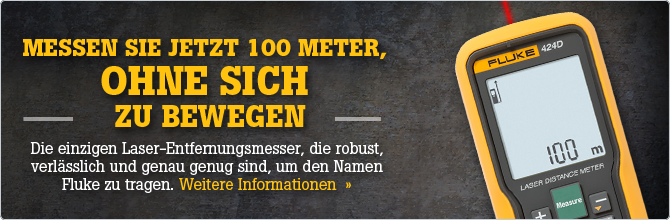
<style>
.page{position:relative;width:670px;height:220px}
.page>*{position:absolute;margin:0}
.t1{font:24px/44.8px "BotonPro-Bold";color:#ffc20e;text-transform:uppercase}
.t2{font:26.8px/44.8px "BotonPro-Bold";color:#ffc20e;text-transform:uppercase}
.t3{font:39.5px/39.5px "BotonPro-Bold";color:#ffc20e;text-transform:uppercase}
.t4{font:30px/32px "BotonPro-Bold";color:#ffc20e;text-transform:uppercase}
.t5{font:16px/18px "BotonPro-Regular";color:#ffffff}
.t6{font:16px/18px "BotonPro-Regular";color:#ffc20e}
</style>
<div class="page">
<p class="t1" style="left:23px;top:39px;width:364px;height:88px;text-align:center">Messen Sie jetzt 100 Meter,  <span class="t2">      <br></span><span class="t3">ohne sich<br> </span><span class="t4">zu bewegen</span></p>
<p class="t5" style="left:30px;top:142px;width:353px;height:51px;text-align:center">Die einzigen Laser-Entfernungsmesser, die robust, verlässlich und genau genug sind, um den Namen Fluke zu tragen.<span class="t6"> Weitere Informationen  »</span></p>
</div>
